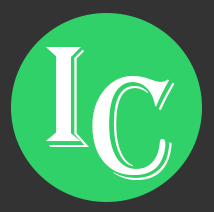
<style>
.page{position:relative;width:214px;height:212px;background:#2fd168}
.page>*{position:absolute;margin:0}
.t1{font:150px "Algerian";color:#ffffff}
</style>
<div class="page">
<p class="t1" style="left:46px;top:47px;width:43px;height:100px">i</p>
<p class="t1" style="left:92px;top:76px;width:83px;height:104px">c</p>
</div>
